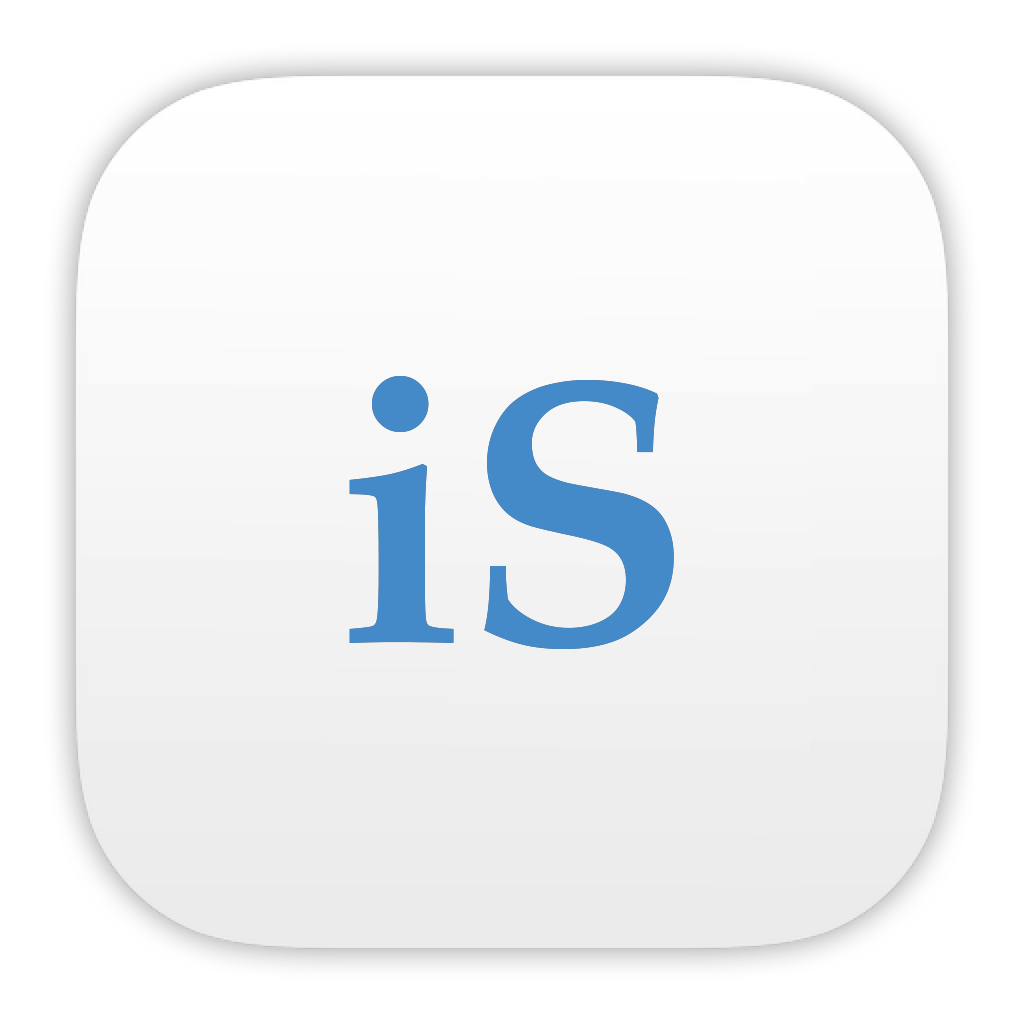
<style>
.page{position:relative;width:1024px;height:1024px;background:#ffffff}
.page>*{position:absolute;margin:0}
.t1{font:378px "Palatino-Bold";color:#448ac9}
</style>
<div class="page">
<p class="t1" style="left:349px;top:376px;width:325px;height:273px">iS</p>
</div>
